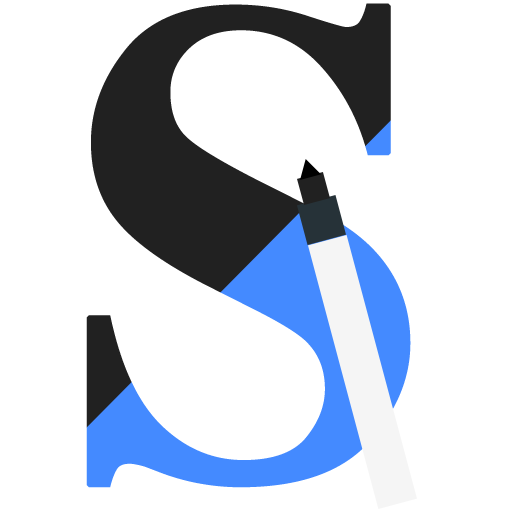
<style>
.page{position:relative;width:512px;height:512px;background:#ffffff}
.page>*{position:absolute;margin:0}
.t1{font:676.4px "Times-Bold";letter-spacing:-0.04em;font-weight:bold}
</style>
<div class="page">
<p class="t1" style="left:86px;top:3px;width:325px;height:485px">S</p>
</div>
